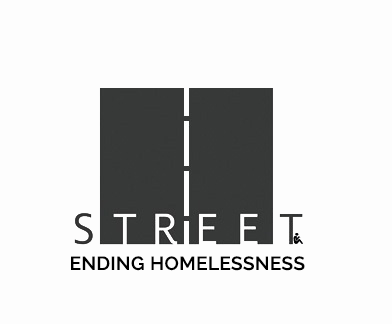
<style>
.page{position:relative;width:392px;height:324px;background:#fdfdfd}
.page>*{position:absolute;margin:0}
.t1{font:19px "Raleway-SemiBold";letter-spacing:0.02em;color:#000000}
</style>
<div class="page">
<p class="t1" style="left:71px;top:256px;width:234px;height:15px">ENDING HOMELESSNESS</p>
</div>
